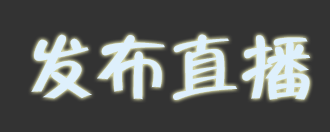
<style>
.page{position:relative;width:330px;height:132px;background:#333333}
.page>*{position:absolute;margin:0}
.t1{font:72px "FZZBHJW--GB1-0";color:#def0fc}
</style>
<div class="page">
<p class="t1" style="left:31px;top:34px;width:280px;height:66px">发布直播</p>
</div>
